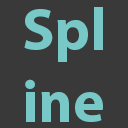
<style>
.page{position:relative;width:128px;height:128px;background:#393939}
.page>*{position:absolute;margin:0}
.t1{font:60px "MyriadPro-Bold";color:#78c8c8}
</style>
<div class="page">
<p class="t1" style="left:24px;top:7px;width:79px;height:115px">Spl<br>ine</p>
</div>
